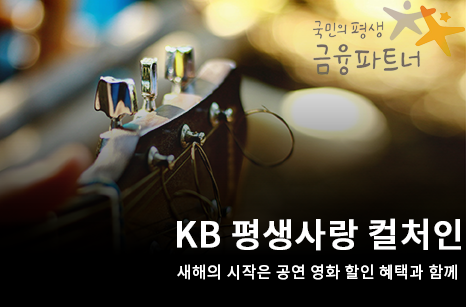
<style>
.page{position:relative;width:466px;height:307px}
.page>*{position:absolute;margin:0}
.t1{font:34px "NotoSansCJKkr-Medium";color:#ffffff;font-weight:bold}
.t2{font:16px "NotoSansCJKkr-Medium";letter-spacing:0.028em;color:#ffffff}
</style>
<div class="page">
<p class="t1" style="left:177px;top:218px;width:284px;height:33px">KB 평생사랑 컬처인</p>
<p class="t2" style="left:177px;top:264px;width:280px;height:16px">새해의 시작은 공연 영화 할인 혜택과 함께</p>
</div>
